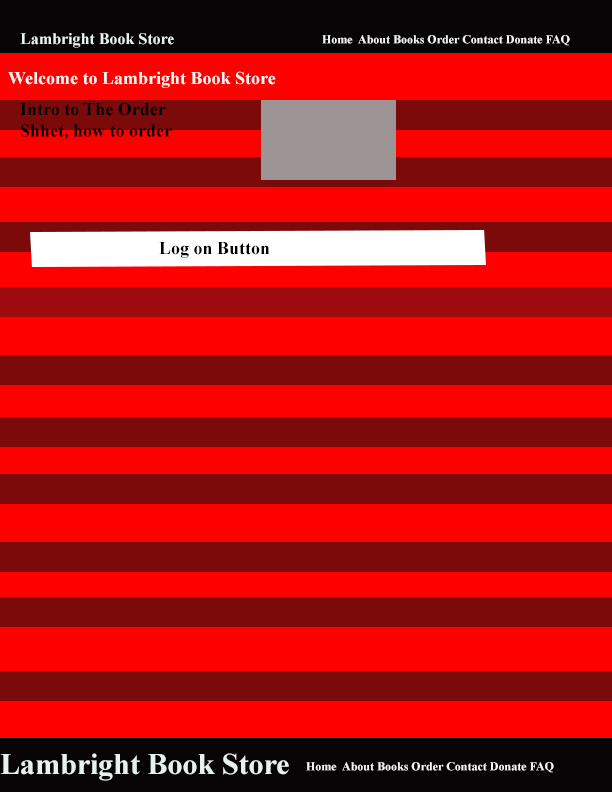
<style>
.page{position:relative;width:612px;height:792px;background:#ff0000}
.page>*{position:absolute;margin:0}
.t1{font:16px "TimesNewRomanPS-BoldMT";color:#e9f1f0}
.t2{font:12px "TimesNewRomanPS-BoldMT";color:#f7f4f4}
.t3{font:18px "TimesNewRomanPS-BoldMT";color:#f7f4f4}
.t4{font:18px "TimesNewRomanPS-BoldMT";color:#000000}
.t5{font:30px "TimesNewRomanPS-BoldMT";color:#e9f1f0}
</style>
<div class="page">
<p class="t1" style="left:20px;top:33px;width:154px;height:15px">Lambright Book Store</p>
<p class="t2" style="left:322px;top:35px;width:248px;height:11px">Home  About Books Order Contact Donate FAQ</p>
<p class="t3" style="left:8px;top:71px;width:268px;height:17px">Welcome to Lambright Book Store</p>
<p class="t4" style="left:20px;top:102px;width:152px;height:38px">Intro to The Order Shhet, how to order</p>
<p class="t4" style="left:159px;top:242px;width:111px;height:16px">Log on Button</p>
<p class="t5" style="left:0px;top:753px;width:289px;height:28px">Lambright Book Store</p>
<p class="t2" style="left:306px;top:762px;width:248px;height:11px">Home  About Books Order Contact Donate FAQ</p>
</div>
